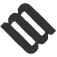
<style>
.page{position:relative;width:57px;height:57px;background:#ffffff}
.page>*{position:absolute;margin:0}
.t1{font:50.7px "Amplitude-Bold";letter-spacing:-0.06em;color:#333333}
</style>
<div class="page">
<p class="t1" style="left:0px;top:3px;width:45px;height:43px;rotate:-45deg">m</p>
<p class="t1" style="left:11px;top:11px;width:45px;height:43px;rotate:135deg">m</p>
</div>
